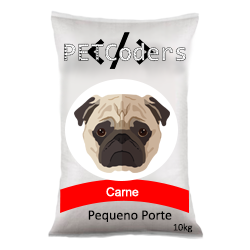
<style>
.page{position:relative;width:250px;height:250px;background:#ffffff}
.page>*{position:absolute;margin:0}
.t1{font:12px "ArialMT";color:#ffffff}
.t2{font:14px "Calibri";color:#000000}
.t3{font:10px "Calibri";color:#000000}
</style>
<div class="page">
<p class="t1" style="left:106px;top:187px;width:33px;height:10px">Carne</p>
<p class="t2" style="left:88px;top:210px;width:84px;height:12px">Pequeno Porte</p>
<p class="t3" style="left:173px;top:223px;width:20px;height:10px">10kg</p>
</div>
